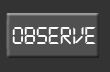
<style>
.page{position:relative;width:110px;height:72px;background:#333333}
.page>*{position:absolute;margin:0}
.t1{font:26px "DS-Digital";letter-spacing:-0.025em;color:#ffffff}
</style>
<div class="page">
<p class="t1" style="left:12px;top:27px;width:84px;height:18px">Observe</p>
</div>
